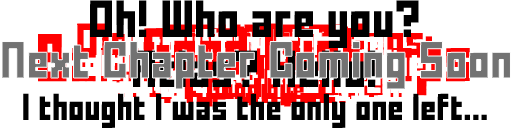
<style>
.page{position:relative;width:512px;height:128px;background:#ffffff}
.page>*{position:absolute;margin:0}
.t1{font:20.8px/33.3px "FFFForward";letter-spacing:0.025em;color:#000000}
.t2{font:29.2px/50px "FFFForward";letter-spacing:0.025em;color:#000000}
</style>
<div class="page">
<p class="t1" style="left:23px;top:0px;width:464px;height:128px;text-align:center"><span class="t2">Oh! Who are you? <br>Atlas? Hello!<br></span>I thought I was the only one left...</p>
</div>
